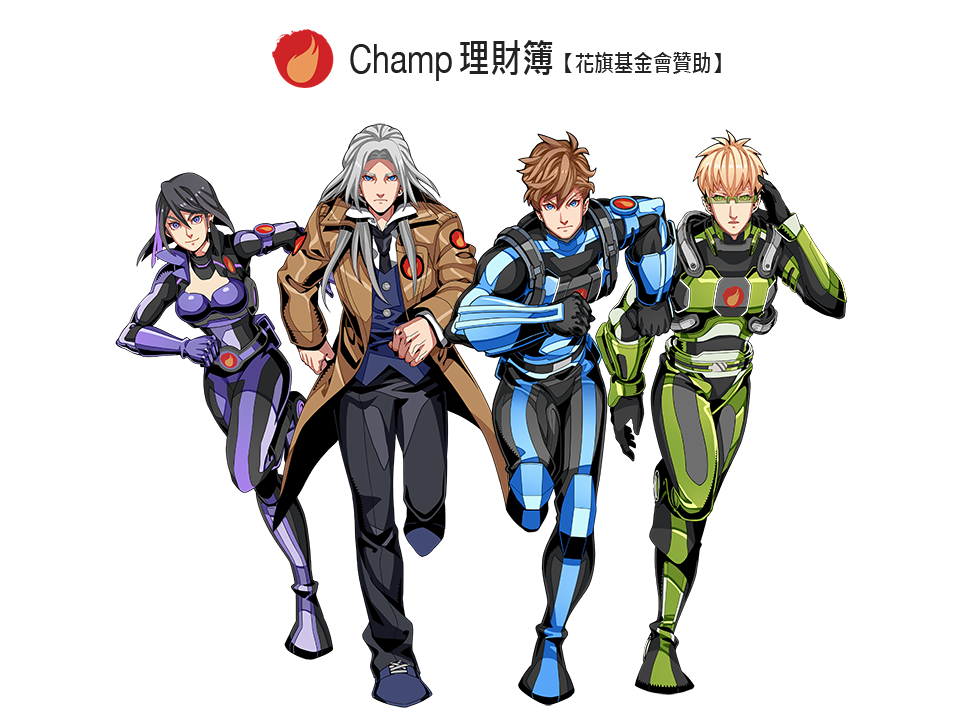
<style>
.page{position:relative;width:960px;height:720px;background:#ffffff}
.page>*{position:absolute;margin:0}
.t1{font:40px "HelveticaNeue";color:#222222;scale:0.8 1}
.t2{font:40px "MicrosoftJhengHeiBold";color:#222222;scale:0.8 1}
.t3{font:24.4px "MicrosoftJhengHeiBold";color:#222222;scale:0.8 1}
</style>
<div class="page">
<p class="t1" style="left:350px;top:40px;width:203px;height:41px">Champ <span class="t2">理財簿</span></p>
<p class="t3" style="left:565px;top:52px;width:156px;height:22px">【花旗基金會贊助】</p>
</div>
